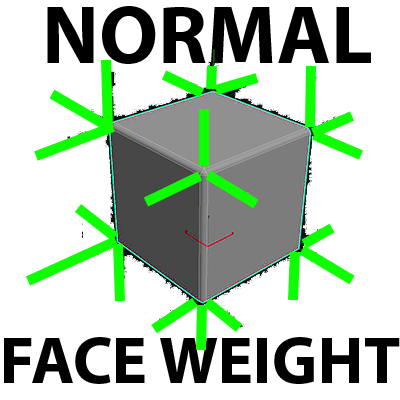
<style>
.page{position:relative;width:400px;height:400px;background:#ffffff}
.page>*{position:absolute;margin:0}
.t1{font:82.4px "MyriadPro-Bold";color:#000000}
.t2{font:66.5px "MyriadPro-Bold";color:#000000}
</style>
<div class="page">
<p class="t1" style="left:47px;top:6px;width:324px;height:58px">NORMAL</p>
<p class="t2" style="left:4px;top:337px;width:396px;height:47px">FACE WEIGHT</p>
</div>
